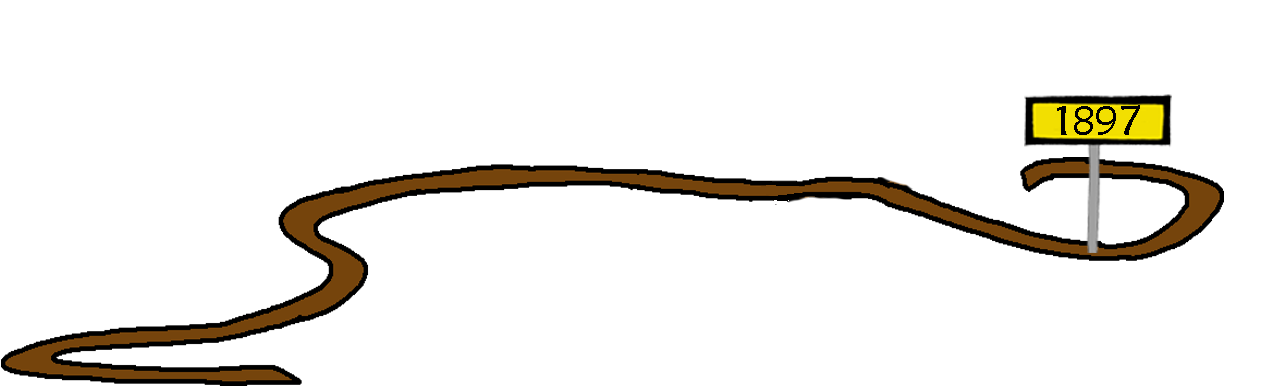
<style>
.page{position:relative;width:1278px;height:386px;background:#ffffff}
.page>*{position:absolute;margin:0}
.t1{font:41.7px "MaiandraGD-Regular";color:#000000}
</style>
<div class="page">
<p class="t1" style="left:1057px;top:105px;width:83px;height:30px">1897</p>
</div>
